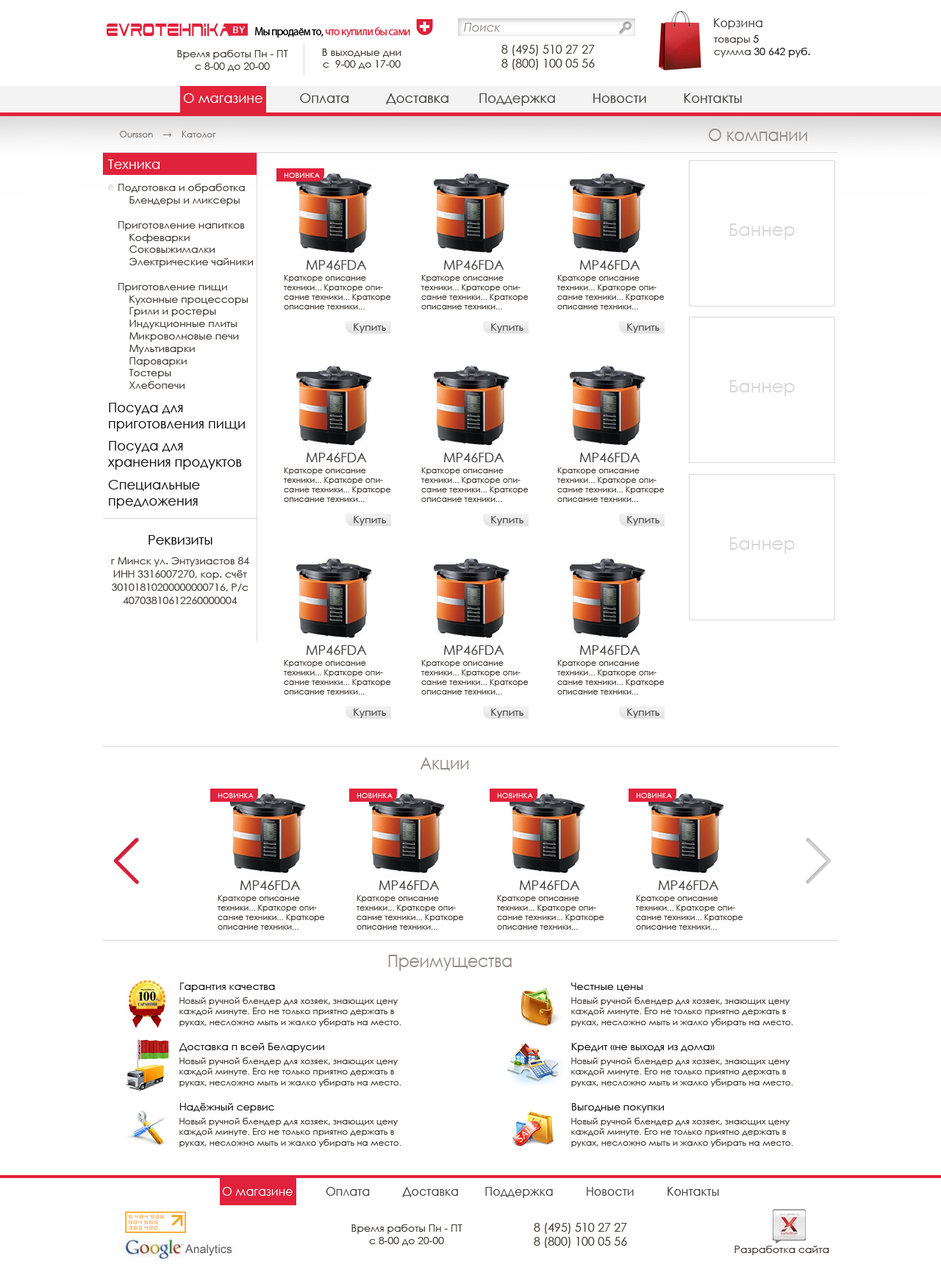
<style>
.page{position:relative;width:941px;height:1267px;background:#ffffff}
.page>*{position:absolute;margin:0}
.t1{font:21.5px "Dodger";letter-spacing:0.016em;color:#e1223c;scale:0.53 1}
.t2{font:9.1px "MyriadPro-Cond";letter-spacing:0.016em;color:#ffffff;text-transform:uppercase;scale:1.73 1}
.t3{font:11px "MyriadPro-Regular";letter-spacing:-0.044em;color:#e1223b}
.t4{font:11px "MyriadPro-Regular";letter-spacing:-0.044em;color:#000000}
.t5{font:11.8px "CenturyGothic-Italic";color:#968c85}
.t6{font:11.8px "CenturyGothic";color:#434342}
.t7{font:10.3px "CenturyGothic";color:#151515}
.t8{font:10.3px "CenturyGothic";color:#423c37}
.t9{font:11.8px "CenturyGothic";color:#423c37}
.t10{font:13.2px "CenturyGothic";color:#434342}
.t11{font:13.2px "CenturyGothic";color:#ffffff}
.t12{font:8.8px "CenturyGothic";color:#7f746c}
.t13{font:17.6px "CenturyGothic";color:#968c85;scale:0.9 1}
.t14{font:7.4px "CenturyGothic";color:#ffffff;text-transform:uppercase}
.t15{font:8.1px "CenturyGothic";color:#423c37}
.t16{font:10.3px "CenturyGothic";color:#434342}
.t17{font:13.2px "CenturyGothic";color:#151515}
.t18{font:10.3px/13.2px "CenturyGothic";color:#423c37}
.t19{font:8.8px "CenturyGothic";color:#423c37}
.t20{font:11.8px "CenturyGothic";color:#ffffff}
</style>
<div class="page">
<p class="t1" style="left:107px;top:24px;width:124px;height:12px">Evrotehnika</p>
<p class="t2" style="left:233px;top:26px;width:13px;height:7px">by</p>
<p class="t3" style="left:255px;top:27px;width:155px;height:10px"><span class="t4">Мы продаём то, </span>что купили бы сами</p>
<p class="t5" style="left:464px;top:23px;width:37px;height:9px">Поиск</p>
<p class="t6" style="left:714px;top:18px;width:48px;height:11px">Корзина</p>
<p class="t7" style="left:714px;top:35px;width:96px;height:22px"><span class="t8">товары </span>5<br><span class="t8">сумма </span>30 642 руб.</p>
<p class="t8" style="left:177px;top:50px;width:111px;height:21px;text-align:center">Время работы Пн - ПТ<br>с 8-00 до 20-00</p>
<p class="t8" style="left:322px;top:49px;width:79px;height:20px;text-align:center">В выходные дни<br>с  9-00 до 17-00</p>
<p class="t9" style="left:501px;top:45px;width:94px;height:25px;text-align:center">8 (495) 510 27 27     <br>8 (800) 100 05 56</p>
<p class="t10" style="left:183px;top:93px;width:559px;height:13px">О магазине          Оплата          Доставка        Поддержка          Новости          Контакты</p>
<p class="t11" style="left:183px;top:93px;width:79px;height:10px">О магазине</p>
<p class="t12" style="left:120px;top:131px;width:96px;height:6px">Oursson    →    Католог</p>
<p class="t13" style="left:709px;top:129px;width:98px;height:12px">О компании</p>
<p class="t11" style="left:108px;top:160px;width:52px;height:9px">Техника</p>
<p class="t14" style="left:284px;top:173px;width:36px;height:5px">Новинка</p>
<p class="t8" style="left:118px;top:184px;width:135px;height:205px">Подготовка и обработка<br>    Блендеры и миксеры<br><br>Приготовление напитков<br>    Кофеварки<br>    Соковыжималки<br>    Электрические чайники<br><br>Приготовление пищи<br>    Кухонные процессоры<br>    Грили и ростеры<br>    Индукционные плиты<br>    Микроволновые печи<br>    Мультиварки<br>    Пароварки<br>    Тостеры<br>    Хлебопечи</p>
<p class="t10" style="left:306px;top:260px;width:61px;height:10px">MP46FDA</p>
<p class="t10" style="left:443px;top:260px;width:61px;height:10px">MP46FDA</p>
<p class="t10" style="left:579px;top:260px;width:61px;height:10px">MP46FDA</p>
<p class="t15" style="left:284px;top:275px;width:107px;height:34px">Краткоре описание техники... Краткоре описание техники... Краткоре описание техники...</p>
<p class="t15" style="left:421px;top:275px;width:108px;height:34px">Краткоре описание техники... Краткоре описание техники... Краткоре описание техники...</p>
<p class="t15" style="left:557px;top:275px;width:108px;height:34px">Краткоре описание техники... Краткоре описание техники... Краткоре описание техники...</p>
<p class="t16" style="left:354px;top:323px;width:32px;height:10px">Купить</p>
<p class="t16" style="left:491px;top:323px;width:32px;height:10px">Купить</p>
<p class="t16" style="left:627px;top:323px;width:32px;height:10px">Купить</p>
<p class="t17" style="left:109px;top:403px;width:136px;height:29px">Посуда для <br>приготовления пищи</p>
<p class="t17" style="left:108px;top:441px;width:134px;height:29px">Посуда для <br>хранения продуктов</p>
<p class="t10" style="left:306px;top:453px;width:61px;height:9px">MP46FDA</p>
<p class="t10" style="left:443px;top:453px;width:61px;height:9px">MP46FDA</p>
<p class="t10" style="left:579px;top:453px;width:61px;height:9px">MP46FDA</p>
<p class="t15" style="left:284px;top:468px;width:107px;height:34px">Краткоре описание техники... Краткоре описание техники... Краткоре описание техники...</p>
<p class="t15" style="left:421px;top:468px;width:108px;height:34px">Краткоре описание техники... Краткоре описание техники... Краткоре описание техники...</p>
<p class="t15" style="left:557px;top:468px;width:108px;height:34px">Краткоре описание техники... Краткоре описание техники... Краткоре описание техники...</p>
<p class="t17" style="left:108px;top:480px;width:92px;height:29px">Специальные <br>предложения</p>
<p class="t16" style="left:354px;top:516px;width:32px;height:10px">Купить</p>
<p class="t16" style="left:491px;top:516px;width:32px;height:10px">Купить</p>
<p class="t16" style="left:627px;top:516px;width:32px;height:10px">Купить</p>
<p class="t17" style="left:148px;top:535px;width:64px;height:10px">Реквизиты</p>
<p class="t18" style="left:111px;top:557px;width:138px;height:47px;text-align:center">г Минск ул. Энтузиастов 84<br>ИНН 3316007270, кор. счёт 30101810200000000716, Р/с 40703810612260000004</p>
<p class="t10" style="left:306px;top:645px;width:61px;height:10px">MP46FDA</p>
<p class="t10" style="left:443px;top:645px;width:61px;height:10px">MP46FDA</p>
<p class="t10" style="left:579px;top:645px;width:61px;height:10px">MP46FDA</p>
<p class="t15" style="left:284px;top:660px;width:107px;height:35px">Краткоре описание техники... Краткоре описание техники... Краткоре описание техники...</p>
<p class="t15" style="left:421px;top:660px;width:108px;height:35px">Краткоре описание техники... Краткоре описание техники... Краткоре описание техники...</p>
<p class="t15" style="left:557px;top:660px;width:108px;height:35px">Краткоре описание техники... Краткоре описание техники... Краткоре описание техники...</p>
<p class="t16" style="left:354px;top:709px;width:32px;height:9px">Купить</p>
<p class="t16" style="left:491px;top:709px;width:32px;height:9px">Купить</p>
<p class="t16" style="left:627px;top:709px;width:32px;height:9px">Купить</p>
<p class="t13" style="left:420px;top:757px;width:49px;height:14px">Акции</p>
<p class="t14" style="left:218px;top:793px;width:36px;height:5px">Новинка</p>
<p class="t14" style="left:357px;top:793px;width:36px;height:5px">Новинка</p>
<p class="t14" style="left:497px;top:793px;width:36px;height:5px">Новинка</p>
<p class="t14" style="left:636px;top:793px;width:36px;height:5px">Новинка</p>
<p class="t10" style="left:240px;top:881px;width:61px;height:9px">MP46FDA</p>
<p class="t10" style="left:379px;top:881px;width:61px;height:9px">MP46FDA</p>
<p class="t10" style="left:519px;top:881px;width:61px;height:9px">MP46FDA</p>
<p class="t10" style="left:658px;top:881px;width:61px;height:9px">MP46FDA</p>
<p class="t15" style="left:218px;top:895px;width:107px;height:35px">Краткоре описание техники... Краткоре описание техники... Краткоре описание техники...</p>
<p class="t15" style="left:357px;top:895px;width:107px;height:35px">Краткоре описание техники... Краткоре описание техники... Краткоре описание техники...</p>
<p class="t15" style="left:497px;top:895px;width:107px;height:35px">Краткоре описание техники... Краткоре описание техники... Краткоре описание техники...</p>
<p class="t15" style="left:636px;top:895px;width:107px;height:35px">Краткоре описание техники... Краткоре описание техники... Краткоре описание техники...</p>
<p class="t13" style="left:388px;top:955px;width:124px;height:16px">Преимущества</p>
<p class="t7" style="left:180px;top:983px;width:95px;height:9px">Гарантия качества</p>
<p class="t7" style="left:571px;top:983px;width:71px;height:9px">Честные цены</p>
<p class="t19" style="left:179px;top:998px;width:222px;height:29px">Новый ручной блендер для хозяек, знающих цену каждой минуте. Его не только приятно держать в руках, несложно мыть и жалко убирать на место.</p>
<p class="t19" style="left:571px;top:998px;width:222px;height:29px">Новый ручной блендер для хозяек, знающих цену каждой минуте. Его не только приятно держать в руках, несложно мыть и жалко убирать на место.</p>
<p class="t7" style="left:179px;top:1043px;width:145px;height:10px">Доставка п всей Беларусии</p>
<p class="t7" style="left:571px;top:1043px;width:144px;height:10px">Кредит «не выходя из дома»</p>
<p class="t19" style="left:179px;top:1058px;width:222px;height:29px">Новый ручной блендер для хозяек, знающих цену каждой минуте. Его не только приятно держать в руках, несложно мыть и жалко убирать на место.</p>
<p class="t19" style="left:571px;top:1058px;width:222px;height:29px">Новый ручной блендер для хозяек, знающих цену каждой минуте. Его не только приятно держать в руках, несложно мыть и жалко убирать на место.</p>
<p class="t7" style="left:179px;top:1103px;width:95px;height:10px">Надёжный сервис</p>
<p class="t7" style="left:572px;top:1103px;width:92px;height:10px">Выгодные покупки</p>
<p class="t19" style="left:179px;top:1118px;width:222px;height:29px">Новый ручной блендер для хозяек, знающих цену каждой минуте. Его не только приятно держать в руках, несложно мыть и жалко убирать на место.</p>
<p class="t19" style="left:571px;top:1118px;width:222px;height:29px">Новый ручной блендер для хозяек, знающих цену каждой минуте. Его не только приятно держать в руках, несложно мыть и жалко убирать на место.</p>
<p class="t6" style="left:222px;top:1187px;width:497px;height:11px">О магазине          Оплата          Доставка        Поддержка          Новости          Контакты</p>
<p class="t20" style="left:222px;top:1187px;width:71px;height:9px">О магазине</p>
<p class="t8" style="left:351px;top:1225px;width:111px;height:21px;text-align:center">Время работы Пн - ПТ<br>с 8-00 до 20-00</p>
<p class="t9" style="left:534px;top:1223px;width:93px;height:25px;text-align:center">8 (495) 510 27 27     <br>8 (800) 100 05 56</p>
<p class="t8" style="left:734px;top:1246px;width:95px;height:10px">Разработка сайта</p>
</div>
